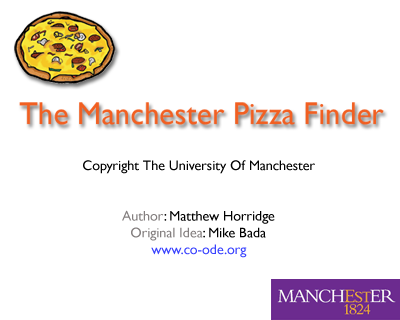
<style>
.page{position:relative;width:400px;height:320px;background:#ffffff}
.page>*{position:absolute;margin:0}
.t1{font:14px "GillSans";color:#000000}
.t2{font:14px "GillSans";color:#847f7f}
.t3{font:14px "GillSans";color:#3942ff}
</style>
<div class="page">
<p class="t1" style="left:83px;top:160px;width:232px;height:98px;text-align:center">Copyright The University Of Manchester<br><br><br><span class="t2">Author</span>: Matthew Horridge<br><span class="t2">Original Idea</span>: Mike Bada<br><span class="t3">www.co-ode.org</span></p>
</div>
